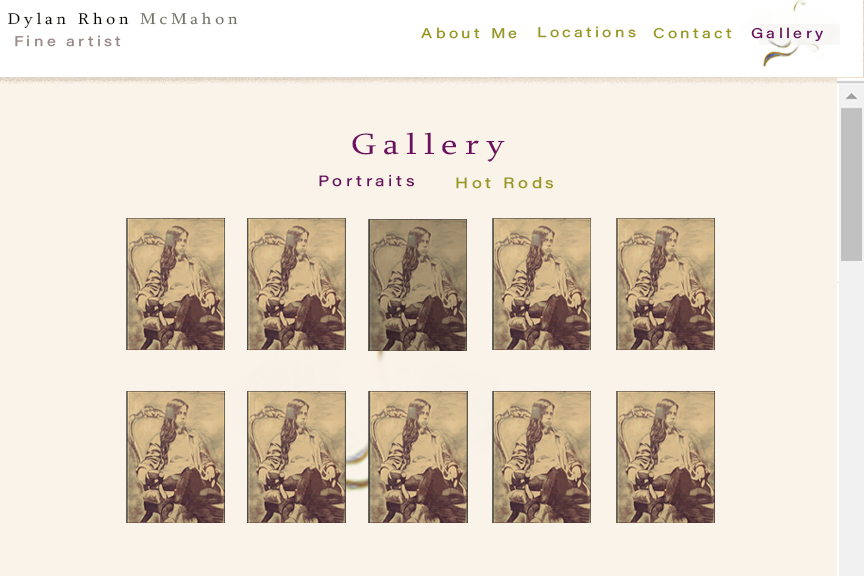
<style>
.page{position:relative;width:864px;height:576px;background:#faf3ea}
.page>*{position:absolute;margin:0}
.t1{font:16px "Sylfaen";letter-spacing:0.2em;color:#060600;scale:1.1 1}
.t2{font:16px "Sylfaen";letter-spacing:0.2em;color:#717165;scale:1.1 1}
.t3{font:14px "AcuminConcept-Regular";letter-spacing:0.2em;color:#99991c;scale:1.2 1}
.t4{font:14px "AcuminConcept-Regular";letter-spacing:0.2em;color:#6e1261;scale:1.2 1}
.t5{font:14px "AcuminConcept-Regular";letter-spacing:0.2em;color:#9b8888;scale:1.2 1}
.t6{font:30px "Sylfaen";letter-spacing:0.2em;color:#6d1061;scale:1.2 1}
.t7{font:15px "AcuminConcept-Regular";letter-spacing:0.2em;color:#6d1061;scale:1.2 1}
.t8{font:15px "AcuminConcept-Regular";letter-spacing:0.2em;color:#99991c;scale:1.2 1}
</style>
<div class="page">
<p class="t1" style="left:8px;top:12px;width:230px;height:16px">Dylan Rhon <span class="t2">McMahon</span></p>
<p class="t3" style="left:421px;top:27px;width:96px;height:12px">About Me</p>
<p class="t3" style="left:538px;top:26px;width:98px;height:12px">Locations</p>
<p class="t3" style="left:653px;top:28px;width:79px;height:11px">Contact</p>
<p class="t4" style="left:751px;top:27px;width:72px;height:14px">Gallery</p>
<p class="t5" style="left:15px;top:35px;width:106px;height:12px">Fine artist</p>
<p class="t6" style="left:352px;top:132px;width:153px;height:30px">Gallery</p>
<p class="t7" style="left:319px;top:174px;width:95px;height:13px">Portraits</p>
<p class="t8" style="left:456px;top:176px;width:97px;height:13px">Hot Rods</p>
</div>
